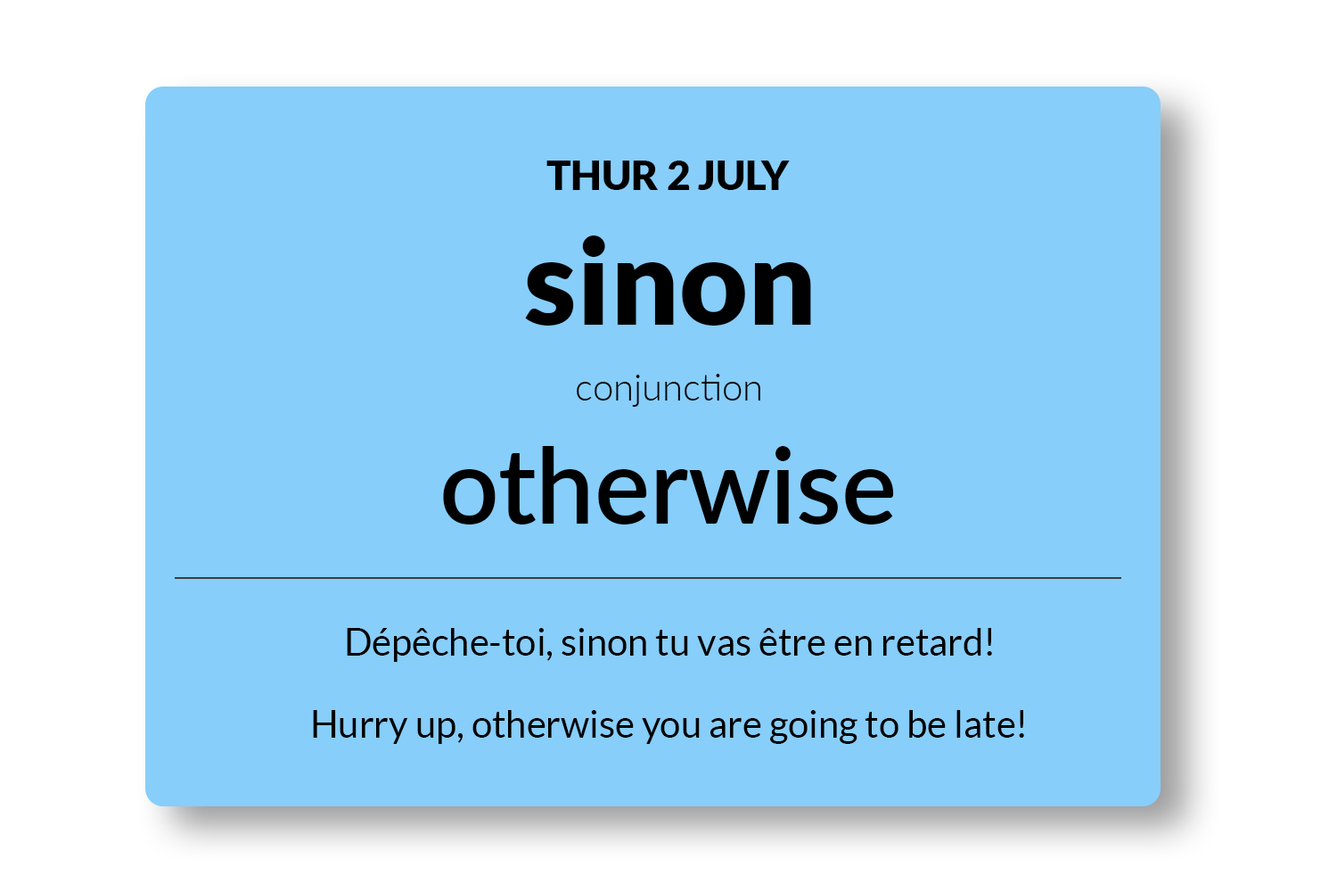
<style>
.page{position:relative;width:1337px;height:892px;background:#87cefa}
.page>*{position:absolute;margin:0}
.t1{font:40.9px "Lato-Black";color:#000000}
.t2{font:118.9px "Lato-Black";color:#000000}
.t3{font:37.2px "Lato-Light";color:#000000}
.t4{font:104px "Lato-Semibold";color:#000000}
.t5{font:37.2px "Lato-Regular";color:#000000}
</style>
<div class="page">
<p class="t1" style="left:547px;top:160px;width:243px;height:30px">THUR 2 JULY</p>
<p class="t2" style="left:525px;top:235px;width:286px;height:90px">sinon</p>
<p class="t3" style="left:577px;top:374px;width:184px;height:33px">conjunction</p>
<p class="t4" style="left:443px;top:446px;width:451px;height:78px">otherwise</p>
<p class="t5" style="left:347px;top:628px;width:645px;height:34px">Dépêche-toi, sinon tu vas être en retard!</p>
<p class="t5" style="left:313px;top:710px;width:711px;height:34px">Hurry up, otherwise you are going to be late!</p>
</div>
